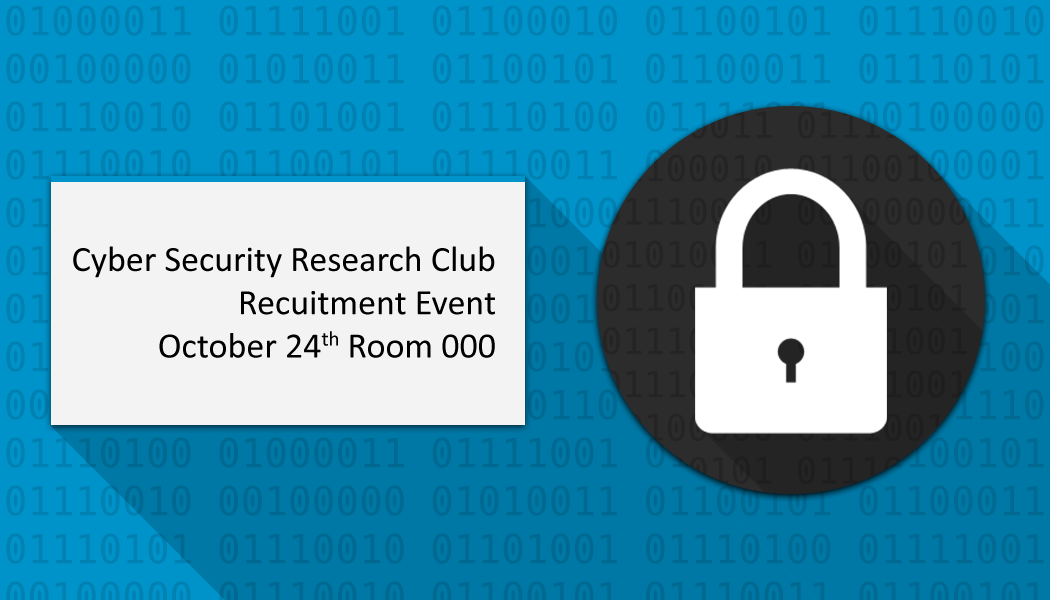
<style>
.page{position:relative;width:1050px;height:600px;background:#0093ca}
.page>*{position:absolute;margin:0}
.t1{font:36px "Calibri";color:#000000}
</style>
<div class="page">
<p class="t1" style="left:73px;top:246px;width:422px;height:112px;text-align:right">Cyber Security Research Club<br>Recuitment Event<br>October 24th Room 000</p>
</div>
